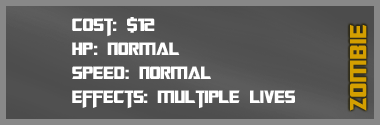
<style>
.page{position:relative;width:380px;height:125px}
.page>*{position:absolute;margin:0}
.t1{font:20px "TransformersMovie";color:#ffffff}
.t2{font:20px "TransformersMovie";letter-spacing:0.04em;color:#ffffff}
.t3{font:26px "TransformersMovie";letter-spacing:0.04em;color:#d49f00}
</style>
<div class="page">
<p class="t1" style="left:72px;top:17px;width:223px;height:92px">Cost: $12<br>h<span class="t2">p</span>: normal<br>Spee<span class="t2">d</span>: normal<br>effects: multiple lives</p>
<p class="t3" style="left:350px;top:24px;width:17px;height:87px;rotate:-90deg">zombie</p>
</div>
